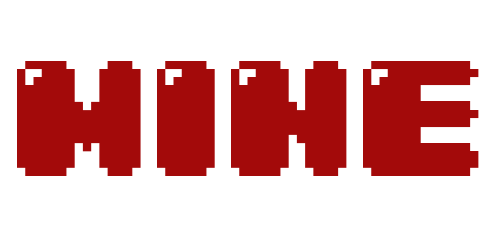
<style>
.page{position:relative;width:490px;height:245px;background:#ffffff}
.page>*{position:absolute;margin:0}
.t1{font:140px "04b30";color:#a30a0a}
</style>
<div class="page">
<p class="t1" style="left:17px;top:61px;width:462px;height:115px">MINE</p>
</div>
